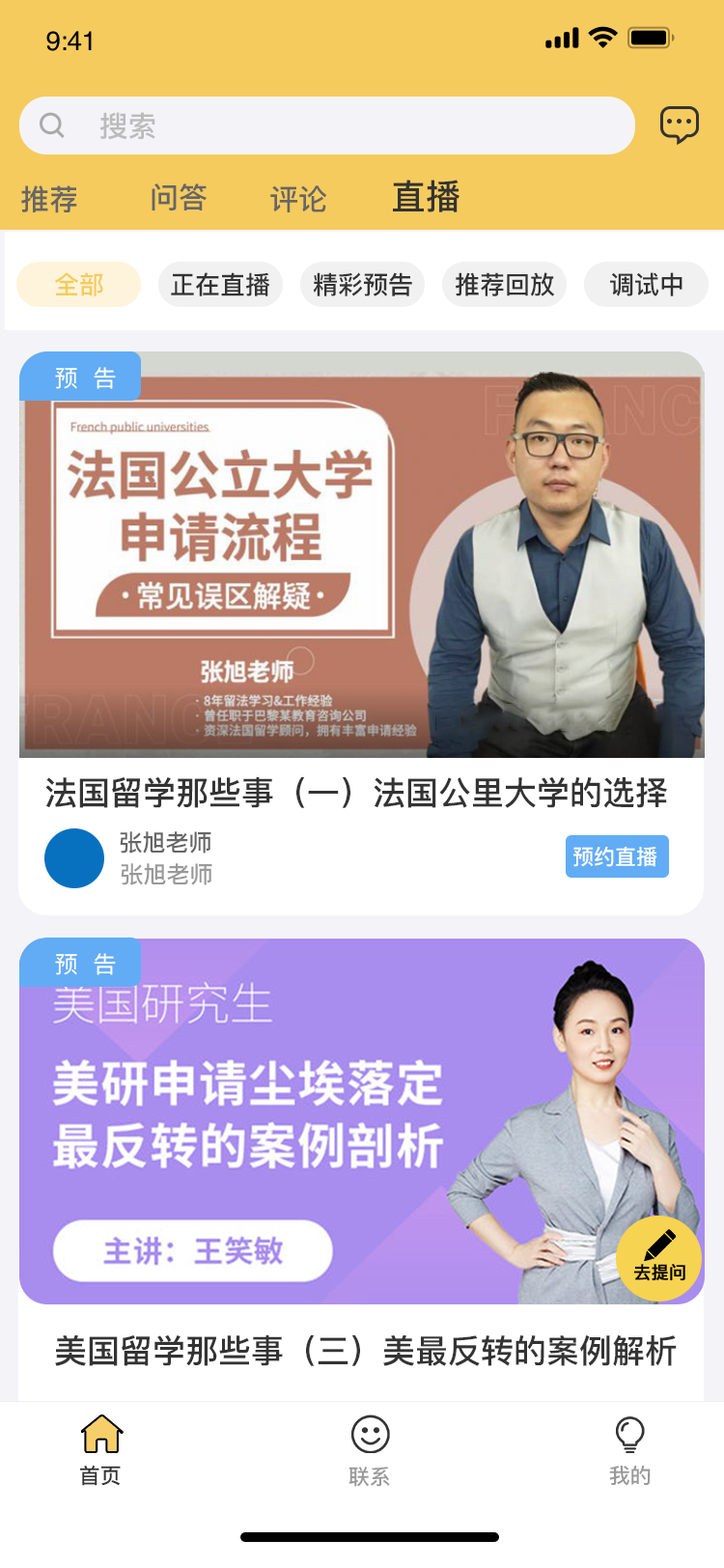
<style>
.page{position:relative;width:724px;height:1568px;background:#ffffff}
.page>*{position:absolute;margin:0}
.t1{font:29px "PingFang-SC-Bold";color:#bbbbbc}
.t2{font:29px "PingFang-SC-Bold";color:#666666}
.t3{font:34.8px "PingFang-SC-Bold";color:#333333}
.t4{font:25.1px "PingFang-SC-Bold";color:#f6cb5d}
.t5{font:25.1px "PingFang-SC-Bold";color:#333333}
.t6{font:23.2px "PingFang-SC-Medium";color:#ffffff}
.t7{font:32.8px "PingFang-SC-Bold";color:#333333}
.t8{font:23.2px "PingFang-SC-Bold";color:#666666}
.t9{font:21.2px "PingFang-SC-Bold";color:#ffffff}
.t10{font:23.2px "PingFang-SC-Bold";color:#999999}
.t11{font:17.4px "PingFang-SC-Bold";color:#000000;font-weight:bold}
.t12{font:21.2px "PingFang-SC-Bold";color:#333333}
.t13{font:21.2px "PingFang-SC-Bold";color:#999999}
</style>
<div class="page">
<p class="t1" style="left:99px;top:112px;width:56px;height:28px">搜索</p>
<p class="t2" style="left:21px;top:185px;width:56px;height:28px">推荐</p>
<p class="t2" style="left:152px;top:183px;width:55px;height:27px">问答</p>
<p class="t2" style="left:270px;top:185px;width:56px;height:27px">评论</p>
<p class="t3" style="left:393px;top:180px;width:67px;height:32px">直播</p>
<p class="t4" style="left:55px;top:272px;width:48px;height:24px">全部</p>
<p class="t5" style="left:171px;top:272px;width:99px;height:24px">正在直播</p>
<p class="t5" style="left:313px;top:272px;width:99px;height:24px">精彩预告</p>
<p class="t5" style="left:456px;top:272px;width:99px;height:24px">推荐回放</p>
<p class="t5" style="left:610px;top:272px;width:73px;height:24px">调试中</p>
<p class="t6" style="left:55px;top:367px;width:61px;height:22px">预  告</p>
<p class="t7" style="left:45px;top:776px;width:622px;height:32px">法国留学那些事（一）法国公里大学的选择</p>
<p class="t8" style="left:120px;top:831px;width:91px;height:23px">张旭老师</p>
<p class="t9" style="left:574px;top:847px;width:84px;height:20px">预约直播</p>
<p class="t10" style="left:121px;top:863px;width:91px;height:22px">张旭老师</p>
<p class="t6" style="left:55px;top:953px;width:61px;height:22px">预  告</p>
<p class="t11" style="left:633px;top:1264px;width:53px;height:17px">去提问</p>
<p class="t7" style="left:55px;top:1334px;width:622px;height:32px">美国留学那些事（三）美最反转的案例解析</p>
<p class="t12" style="left:80px;top:1465px;width:41px;height:21px">首页</p>
<p class="t13" style="left:349px;top:1467px;width:41px;height:20px">联系</p>
<p class="t13" style="left:609px;top:1466px;width:42px;height:19px">我的</p>
</div>
